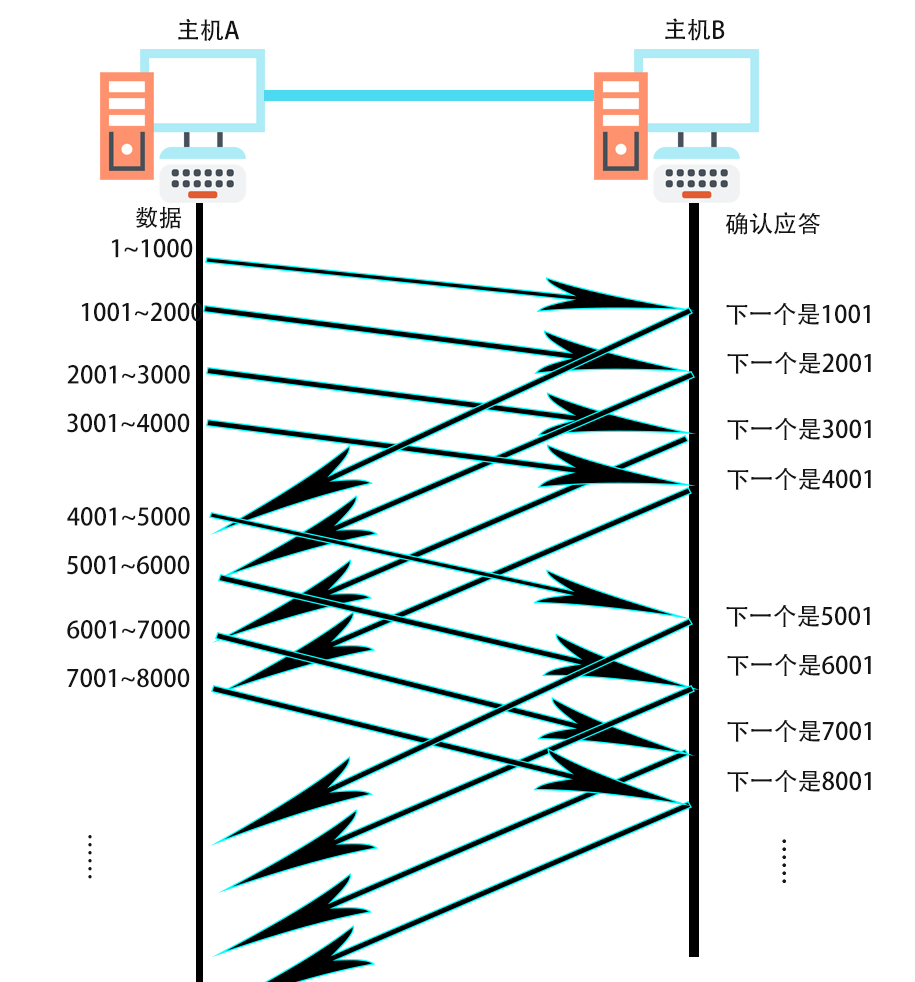
<style>
.page{position:relative;width:915px;height:982px;background:#ffffff}
.page>*{position:absolute;margin:0}
.t1{font:24px "AdobeHeitiStd-Regular";color:#151414}
</style>
<div class="page">
<p class="t1" style="left:178px;top:18px;width:62px;height:23px">主机A</p>
<p class="t1" style="left:665px;top:18px;width:60px;height:23px">主机B</p>
<p class="t1" style="left:135px;top:206px;width:46px;height:23px">数据</p>
<p class="t1" style="left:725px;top:212px;width:95px;height:23px">确认应答</p>
<p class="t1" style="left:111px;top:238px;width:82px;height:20px">1~1000</p>
<p class="t1" style="left:81px;top:302px;width:122px;height:20px">1001~2000</p>
<p class="t1" style="left:726px;top:302px;width:144px;height:23px">下一个是1001</p>
<p class="t1" style="left:727px;top:351px;width:144px;height:23px">下一个是2001</p>
<p class="t1" style="left:67px;top:365px;width:123px;height:19px">2001~3000</p>
<p class="t1" style="left:67px;top:413px;width:123px;height:20px">3001~4000</p>
<p class="t1" style="left:727px;top:417px;width:144px;height:23px">下一个是3001</p>
<p class="t1" style="left:727px;top:467px;width:144px;height:23px">下一个是4001</p>
<p class="t1" style="left:67px;top:507px;width:123px;height:19px">4001~5000</p>
<p class="t1" style="left:67px;top:555px;width:123px;height:20px">5001~6000</p>
<p class="t1" style="left:726px;top:604px;width:144px;height:23px">下一个是5001</p>
<p class="t1" style="left:67px;top:620px;width:123px;height:19px">6001~7000</p>
<p class="t1" style="left:727px;top:653px;width:144px;height:23px">下一个是6001</p>
<p class="t1" style="left:67px;top:668px;width:123px;height:20px">7001~8000</p>
<p class="t1" style="left:727px;top:719px;width:144px;height:23px">下一个是7001</p>
<p class="t1" style="left:727px;top:769px;width:144px;height:23px">下一个是8001</p>
<p class="t1" style="left:88px;top:835px;width:4px;height:44px">……</p>
<p class="t1" style="left:782px;top:839px;width:4px;height:44px">……</p>
<p class="t1" style="left:782px;top:839px;width:4px;height:44px">……</p>
</div>
